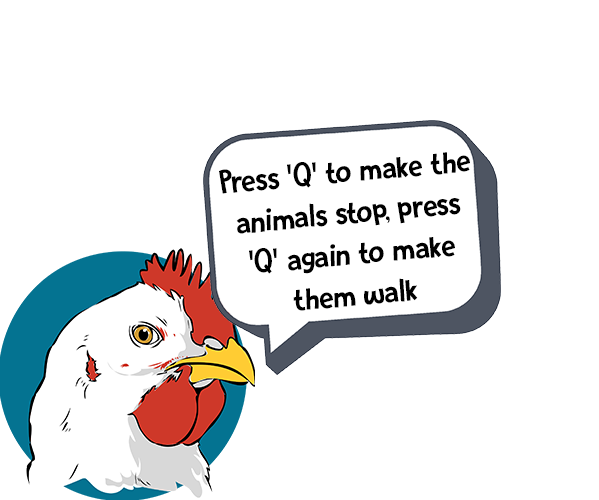
<style>
.page{position:relative;width:599px;height:500px;background:#ffffff}
.page>*{position:absolute;margin:0}
.t1{font:34.3px "OriginalQualityDEMO-Regular";color:#000000}
</style>
<div class="page">
<p class="t1" style="left:219px;top:152px;width:251px;height:159px;rotate:-5deg">Press 'Q' to make the animals stop, press 'Q' again to make them walk</p>
</div>
